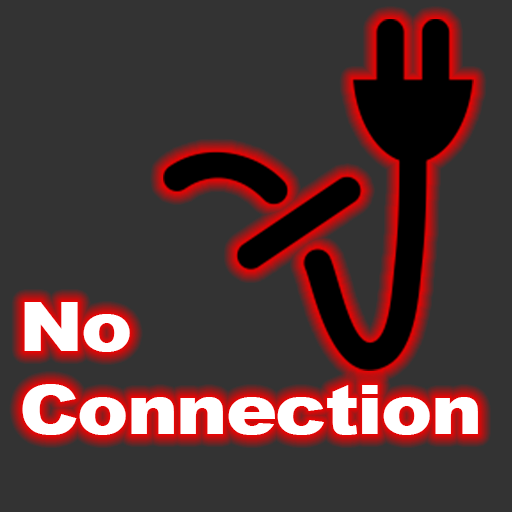
<style>
.page{position:relative;width:512px;height:512px;background:#333333}
.page>*{position:absolute;margin:0}
.t1{font:69px "Arial-Black";letter-spacing:-0.02em;color:#ffffff;scale:1.11 1}
</style>
<div class="page">
<p class="t1" style="left:22px;top:302px;width:456px;height:133px">No<br>Connection</p>
</div>
